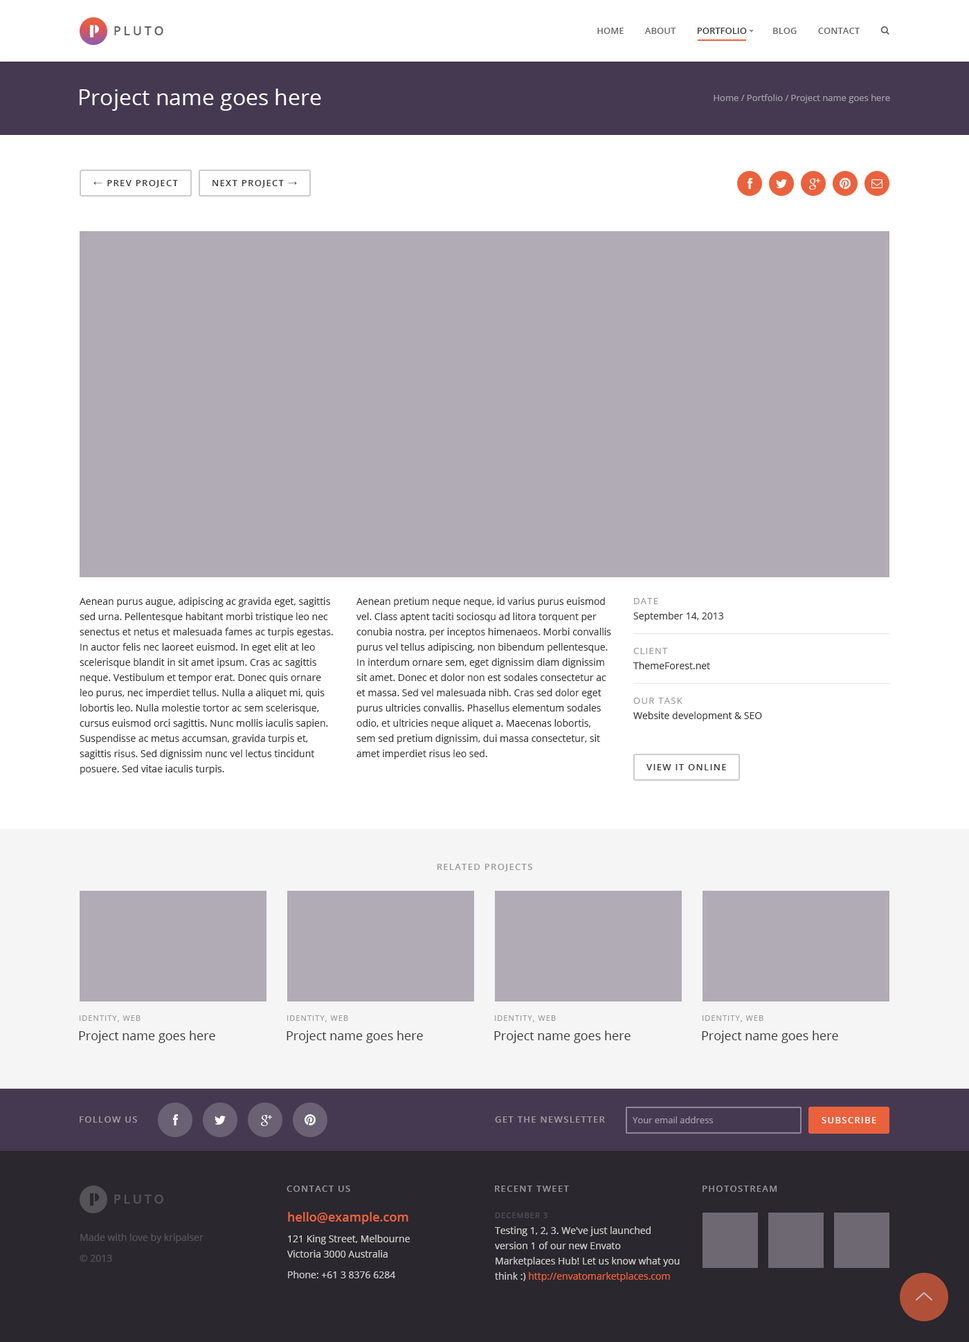
<style>
.page{position:relative;width:969px;height:1342px;background:#ffffff}
.page>*{position:absolute;margin:0}
.t1{font:12.5px "OpenSans-Semibold";letter-spacing:0.2em;color:#666666;text-transform:uppercase}
.t2{font:9px "OpenSans-Semibold";color:#666666;text-transform:uppercase}
.t3{font:9px "OpenSans-Semibold";color:#333333;text-transform:uppercase}
.t4{font:22.2px "OpenSans";color:#ffffff}
.t5{font:9px "OpenSans";color:#a09ca4}
.t6{font:9px "OpenSans-Semibold";letter-spacing:0.1em;color:#333333;text-transform:uppercase}
.t7{font:9px "ArialMT";letter-spacing:0.1em;color:#333333;text-transform:uppercase}
.t8{font:9.7px/15.2px "OpenSans";color:#333333}
.t9{font:9px/15.2px "OpenSans";letter-spacing:0.1em;color:#999999;text-transform:uppercase}
.t10{font:9px "OpenSans-Semibold";letter-spacing:0.1em;color:#999999;text-transform:uppercase}
.t11{font:7.6px "OpenSans";letter-spacing:0.1em;color:#999999;text-transform:uppercase}
.t12{font:12.5px "OpenSans";color:#333333}
.t13{font:9px "OpenSans-Semibold";letter-spacing:0.1em;color:#a09ca4;text-transform:uppercase}
.t14{font:9px "OpenSans-Semibold";letter-spacing:0.1em;color:#ffffff;text-transform:uppercase}
.t15{font:9px "OpenSans-Semibold";letter-spacing:0.1em;color:#979698;text-transform:uppercase}
.t16{font:12.5px "OpenSans-Semibold";letter-spacing:0.2em;color:#555258;text-transform:uppercase}
.t17{font:9.7px/20.8px "OpenSans";color:#cccccc}
.t18{font:12.5px/16.6px "OpenSans-Semibold";color:#ea623d}
.t19{font:9.7px/15.2px "OpenSans";color:#cccccc}
.t20{font:7.6px "OpenSans";letter-spacing:0.1em;color:#545158;text-transform:uppercase}
.t21{font:9.7px/15.9px "OpenSans";color:#cccccc}
.t22{font:9.7px/15.2px "OpenSans";color:#ea623d}
.t23{font:9.7px/20.8px "OpenSans";color:#555258}
</style>
<div class="page">
<p class="t1" style="left:114px;top:26px;width:49px;height:9px">Pluto</p>
<p class="t2" style="left:597px;top:28px;width:263px;height:6px">Home         About         <span class="t3">Portfolio           </span>Blog         Contact</p>
<p class="t4" style="left:80px;top:89px;width:241px;height:22px">Project name goes here</p>
<p class="t5" style="left:714px;top:94px;width:176px;height:9px">Home / Portfolio / Project name goes here</p>
<p class="t6" style="left:93px;top:180px;width:85px;height:8px"><span class="t7">← </span>Prev project</p>
<p class="t6" style="left:213px;top:180px;width:84px;height:8px">Next project <span class="t7">→</span></p>
<p class="t8" style="left:80px;top:597px;width:253px;height:178px">Aenean purus augue, adipiscing ac gravida eget, sagittis sed urna. Pellentesque habitant morbi tristique leo nec senectus et netus et malesuada fames ac turpis egestas. In auctor felis nec laoreet euismod. In eget elit at leo scelerisque blandit in sit amet ipsum. Cras ac sagittis neque. Vestibulum et tempor erat. Donec quis ornare leo purus, nec imperdiet tellus. Nulla a aliquet mi, quis lobortis leo. Nulla molestie tortor ac sem scelerisque, cursus euismod orci sagittis. Nunc mollis iaculis sapien. Suspendisse ac metus accumsan, gravida turpis et, sagittis risus. Sed dignissim nunc vel lectus tincidunt posuere. Sed vitae iaculis turpis.</p>
<p class="t8" style="left:357px;top:597px;width:254px;height:162px">Aenean pretium neque neque, id varius purus euismod vel. Class aptent taciti sociosqu ad litora torquent per conubia nostra, per inceptos himenaeos. Morbi convallis purus vel tellus adipiscing, non bibendum pellentesque. In interdum ornare sem, eget dignissim diam dignissim sit amet. Donec et dolor non est sodales consectetur ac et massa. Sed vel malesuada nibh. Cras sed dolor eget purus ultricies convallis. Phasellus elementum sodales odio, et ultricies neque aliquet a. Maecenas lobortis, sem sed pretium dignissim, dui massa consectetur, sit amet imperdiet risus leo sed.</p>
<p class="t8" style="left:633px;top:598px;width:90px;height:24px"><span class="t9">Date<br></span>September 14, 2013</p>
<p class="t8" style="left:633px;top:648px;width:77px;height:21px"><span class="t9">Client<br></span>ThemeForest.net</p>
<p class="t8" style="left:633px;top:698px;width:129px;height:23px"><span class="t9">Our task<br></span>Website development &amp; SEO</p>
<p class="t6" style="left:647px;top:764px;width:79px;height:7px">View it online</p>
<p class="t10" style="left:437px;top:864px;width:95px;height:8px">Related projects</p>
<p class="t11" style="left:80px;top:1016px;width:61px;height:7px">Identity, Web</p>
<p class="t11" style="left:287px;top:1016px;width:61px;height:7px">Identity, Web</p>
<p class="t11" style="left:495px;top:1016px;width:61px;height:7px">Identity, Web</p>
<p class="t11" style="left:703px;top:1016px;width:61px;height:7px">Identity, Web</p>
<p class="t12" style="left:79px;top:1031px;width:136px;height:12px">Project name goes here</p>
<p class="t12" style="left:287px;top:1031px;width:136px;height:12px">Project name goes here</p>
<p class="t12" style="left:494px;top:1031px;width:137px;height:12px">Project name goes here</p>
<p class="t12" style="left:702px;top:1031px;width:136px;height:12px">Project name goes here</p>
<p class="t13" style="left:80px;top:1117px;width:57px;height:6px">Follow us</p>
<p class="t13" style="left:495px;top:1117px;width:110px;height:6px">Get the newsletter</p>
<p class="t5" style="left:633px;top:1117px;width:80px;height:7px">Your email address</p>
<p class="t14" style="left:822px;top:1117px;width:54px;height:7px">Subscribe</p>
<p class="t15" style="left:287px;top:1186px;width:63px;height:6px">Contact us</p>
<p class="t15" style="left:495px;top:1186px;width:74px;height:6px">Recent tweet</p>
<p class="t15" style="left:703px;top:1186px;width:74px;height:6px">Photostream</p>
<p class="t16" style="left:114px;top:1195px;width:49px;height:9px">Pluto</p>
<p class="t17" style="left:287px;top:1212px;width:123px;height:67px"><span class="t18">hello@example.com<br></span>121 King Street, Melbourne <br><span class="t19">Victoria 3000 Australia<br></span>Phone: +61 3 8376 6284</p>
<p class="t20" style="left:495px;top:1213px;width:53px;height:5px">December 3</p>
<p class="t19" style="left:495px;top:1227px;width:185px;height:55px"><span class="t21">Testing 1, 2, 3. We've just launched </span>version 1 of our new Envato Marketplaces Hub! Let us know what you think :) <span class="t22">http://envatomarketplaces.com</span></p>
<p class="t23" style="left:80px;top:1234px;width:124px;height:28px">Made with love by kripalser<br>© 2013</p>
</div>
